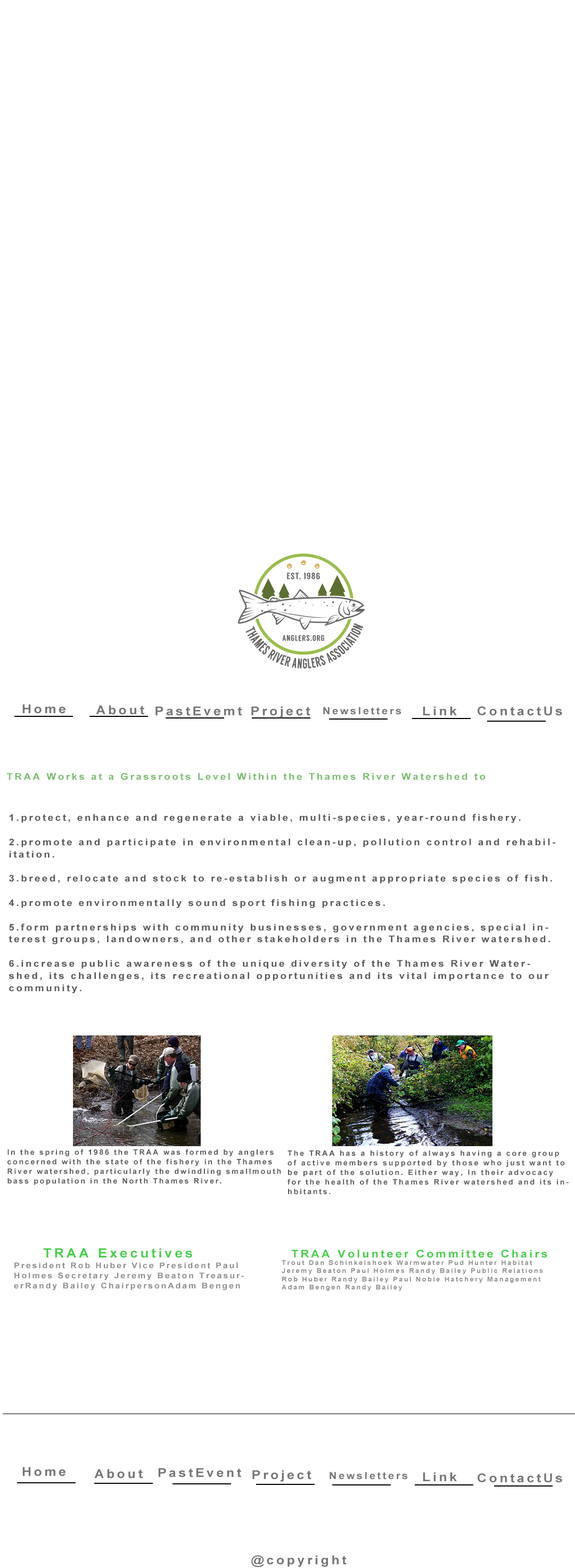
<style>
.page{position:relative;width:575px;height:1568px;background:#ffffff}
.page>*{position:absolute;margin:0}
.t1{font:12.2px "Arial-BoldMT";letter-spacing:0.18em;color:#757575;scale:1.09 1}
.t2{font:9.8px "Arial-BoldMT";letter-spacing:0.18em;color:#757575;scale:1.09 1}
.t3{font:9.3px "Arial-BoldMT";letter-spacing:0.18em;color:#595959;scale:1.09 1}
.t4{font:7.3px "Arial-BoldMT";letter-spacing:0.18em;color:#595959;scale:1.04 1}
.t5{font:7.3px "Arial-BoldMT";letter-spacing:0.18em;color:#595959;scale:1.05 1}
.t6{font:12.7px "Arial-BoldMT";letter-spacing:0.18em;color:#42cf45;scale:1.09 1}
.t7{font:10.8px "Arial-BoldMT";letter-spacing:0.18em;color:#42cf45;scale:1.09 1}
.t8{font:7.8px "Arial-BoldMT";letter-spacing:0.18em;color:#8c8c8c;scale:1.09 1}
.t9{font:6.4px "Arial-BoldMT";letter-spacing:0.18em;color:#8c8c8c;scale:1.09 1}
</style>
<div class="page">
<p class="t1" style="left:22px;top:704px;width:44px;height:10px">Home</p>
<p class="t1" style="left:96px;top:705px;width:48px;height:10px">About</p>
<p class="t1" style="left:156px;top:706px;width:86px;height:10px">PastEvemt</p>
<p class="t1" style="left:251px;top:706px;width:60px;height:12px">Project</p>
<p class="t2" style="left:323px;top:707px;width:79px;height:8px">Newsletters</p>
<p class="t1" style="left:423px;top:706px;width:34px;height:9px">Link</p>
<p class="t1" style="left:478px;top:706px;width:84px;height:10px">ContactUs</p>
<p class="t3" style="left:9px;top:814px;width:547px;height:179px">1.protect, enhance and regenerate a viable, multi-species, year-round fishery.<br><br>2.promote and participate in environmental clean-up, pollution control and rehabilitation.<br><br>3.breed, relocate and stock to re-establish or augment appropriate species of fish.<br><br>4.promote environmentally sound sport fishing practices.<br><br>5.form partnerships with community businesses, government agencies, special interest groups, landowners, and other stakeholders in the Thames River watershed.<br><br>6.increase public awareness of the unique diversity of the Thames River Watershed, its challenges, its recreational opportunities and its vital importance to our community.</p>
<p class="t4" style="left:7px;top:1149px;width:274px;height:36px">In the spring of 1986 the TRAA was formed by anglers concerned with the state of the fishery in the Thames River watershed, particularly the dwindling smallmouth bass population in the North Thames River.</p>
<p class="t5" style="left:288px;top:1150px;width:281px;height:45px">The TRAA has a history of always having a core group of active members supported by those who just want to be part of the solution. Either way, In their advocacy for the health of the Thames River watershed and its inhbitants.</p>
<p class="t6" style="left:43px;top:1248px;width:149px;height:10px">TRAA Executives</p>
<p class="t7" style="left:291px;top:1250px;width:257px;height:8px">TRAA Volunteer Committee Chairs</p>
<p class="t8" style="left:14px;top:1262px;width:230px;height:29px">President Rob Huber Vice President Paul Holmes Secretary Jeremy Beaton TreasurerRandy Bailey ChairpersonAdam Bengen</p>
<p class="t9" style="left:282px;top:1260px;width:261px;height:31px">Trout Dan Schinkelshoek Warmwater Pud Hunter Habitat Jeremy Beaton Paul Holmes Randy Bailey Public Relations Rob Huber Randy Bailey Paul Noble Hatchery Management Adam Bengen Randy Bailey</p>
<p class="t1" style="left:22px;top:1467px;width:44px;height:9px">Home</p>
<p class="t1" style="left:94px;top:1469px;width:49px;height:10px">About</p>
<p class="t1" style="left:158px;top:1468px;width:83px;height:9px">PastEvent</p>
<p class="t1" style="left:252px;top:1470px;width:60px;height:12px">Project</p>
<p class="t2" style="left:330px;top:1472px;width:78px;height:8px">Newsletters</p>
<p class="t1" style="left:423px;top:1472px;width:34px;height:9px">Link</p>
<p class="t1" style="left:478px;top:1473px;width:84px;height:10px">ContactUs</p>
<p class="t1" style="left:251px;top:1555px;width:96px;height:12px">@copyright 2019 Traa</p>
</div>
